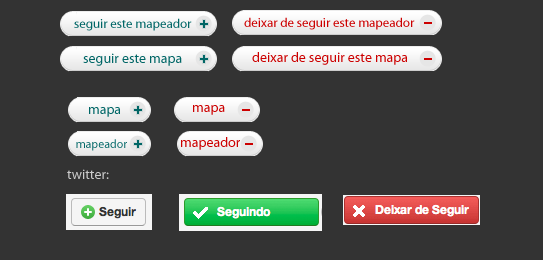
<style>
.page{position:relative;width:543px;height:260px;background:#333333}
.page>*{position:absolute;margin:0}
.t1{font:13px "MyriadPro-Regular";color:#cc0000}
.t2{font:13px "MyriadPro-Regular";color:#006666}
.t3{font:14px "MyriadPro-Regular";color:#006666}
.t4{font:14px "MyriadPro-Regular";color:#cc0000}
.t5{font:12px "MyriadPro-Regular";color:#006666}
.t6{font:14px "MyriadPro-Regular";color:#cccccc}
</style>
<div class="page">
<p class="t1" style="left:244px;top:17px;width:171px;height:13px">deixar de seguir este mapeador</p>
<p class="t2" style="left:74px;top:18px;width:118px;height:13px">seguir este mapeador</p>
<p class="t3" style="left:83px;top:53px;width:99px;height:13px">seguir este mapa</p>
<p class="t4" style="left:252px;top:52px;width:155px;height:13px">deixar de seguir este mapa</p>
<p class="t3" style="left:89px;top:107px;width:31px;height:10px">mapa</p>
<p class="t4" style="left:193px;top:105px;width:32px;height:10px">mapa</p>
<p class="t4" style="left:181px;top:137px;width:59px;height:13px">mapeador</p>
<p class="t5" style="left:76px;top:139px;width:51px;height:12px">mapeador</p>
<p class="t6" style="left:67px;top:169px;width:42px;height:10px">twitter:</p>
</div>
